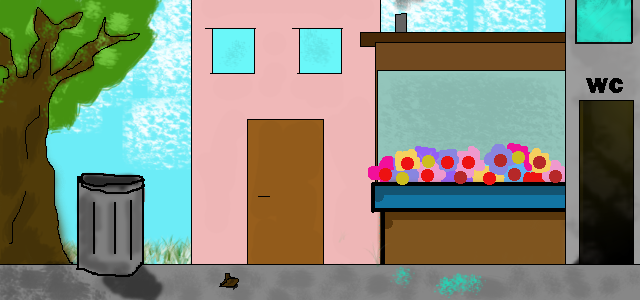
<style>
.page{position:relative;width:640px;height:300px}
.page>*{position:absolute;margin:0}
.t1{font:30px "FranklinGothic-Heavy";color:#000000}
</style>
<div class="page">
<p class="t1" style="left:586px;top:78px;width:37px;height:15px">wc</p>
</div>
